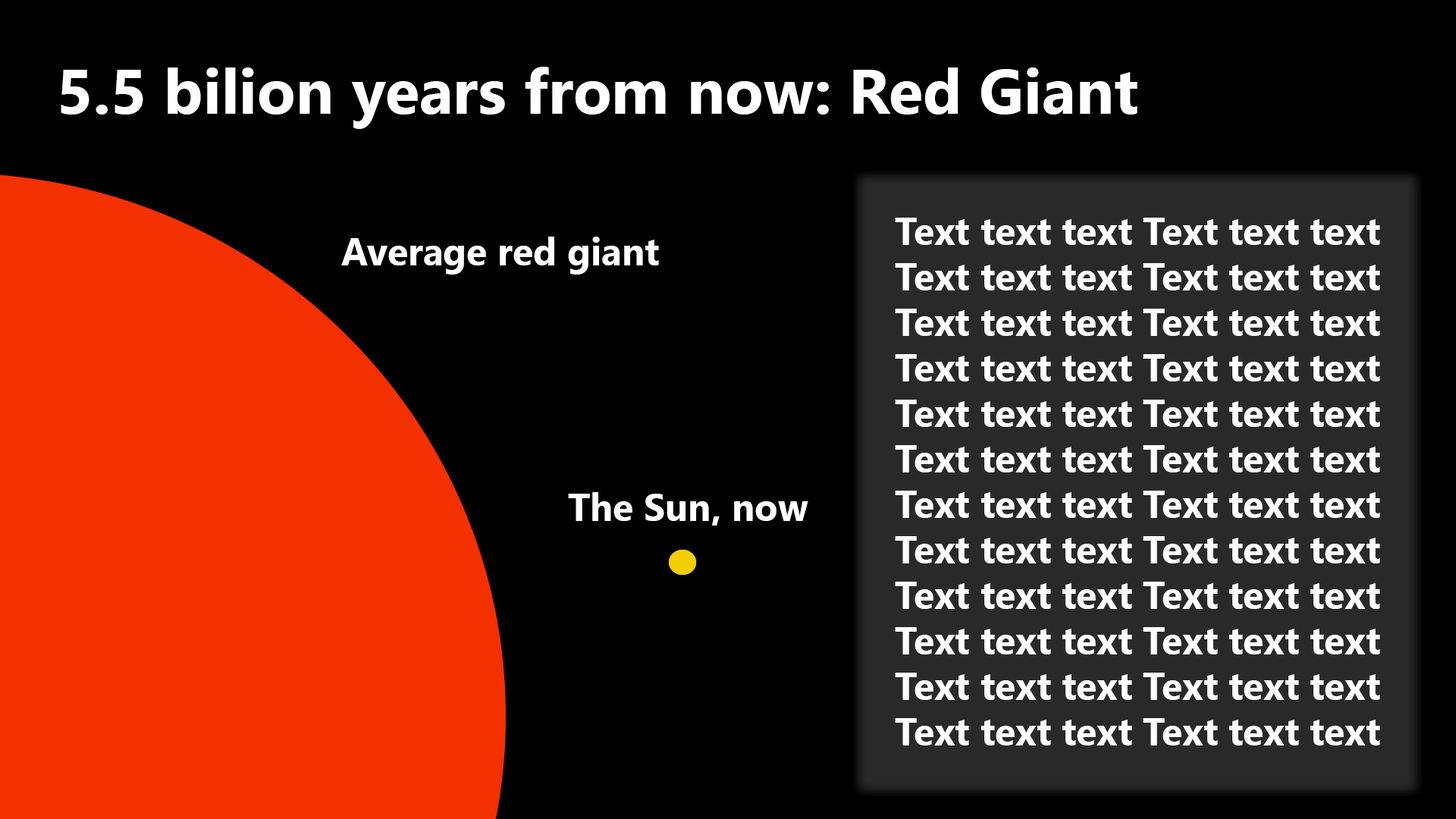
<style>
.page{position:relative;width:1456px;height:819px;background:#000000}
.page>*{position:absolute;margin:0}
.t1{font:63.2px "SegoeUI-Bold";color:#ffffff}
.t2{font:9.1px "SegoeUI-Bold";color:#ffffff}
</style>
<div class="page">
<p class="t1" style="left:61px;top:67px;width:1076px;height:62px">5.5 bilion years from now: Red Giant</p>
<p class="t2" style="left:895px;top:218px;width:485px;height:527px">Text text text Text text text<br>Text text text Text text text<br>Text text text Text text text<br>Text text text Text text text<br>Text text text Text text text<br>Text text text Text text text<br>Text text text Text text text<br>Text text text Text text text<br>Text text text Text text text<br>Text text text Text text text<br>Text text text Text text text<br>Text text text Text text text</p>
<p class="t2" style="left:341px;top:237px;width:318px;height:38px">Average red giant</p>
<p class="t2" style="left:568px;top:492px;width:240px;height:34px">The Sun, now</p>
</div>
